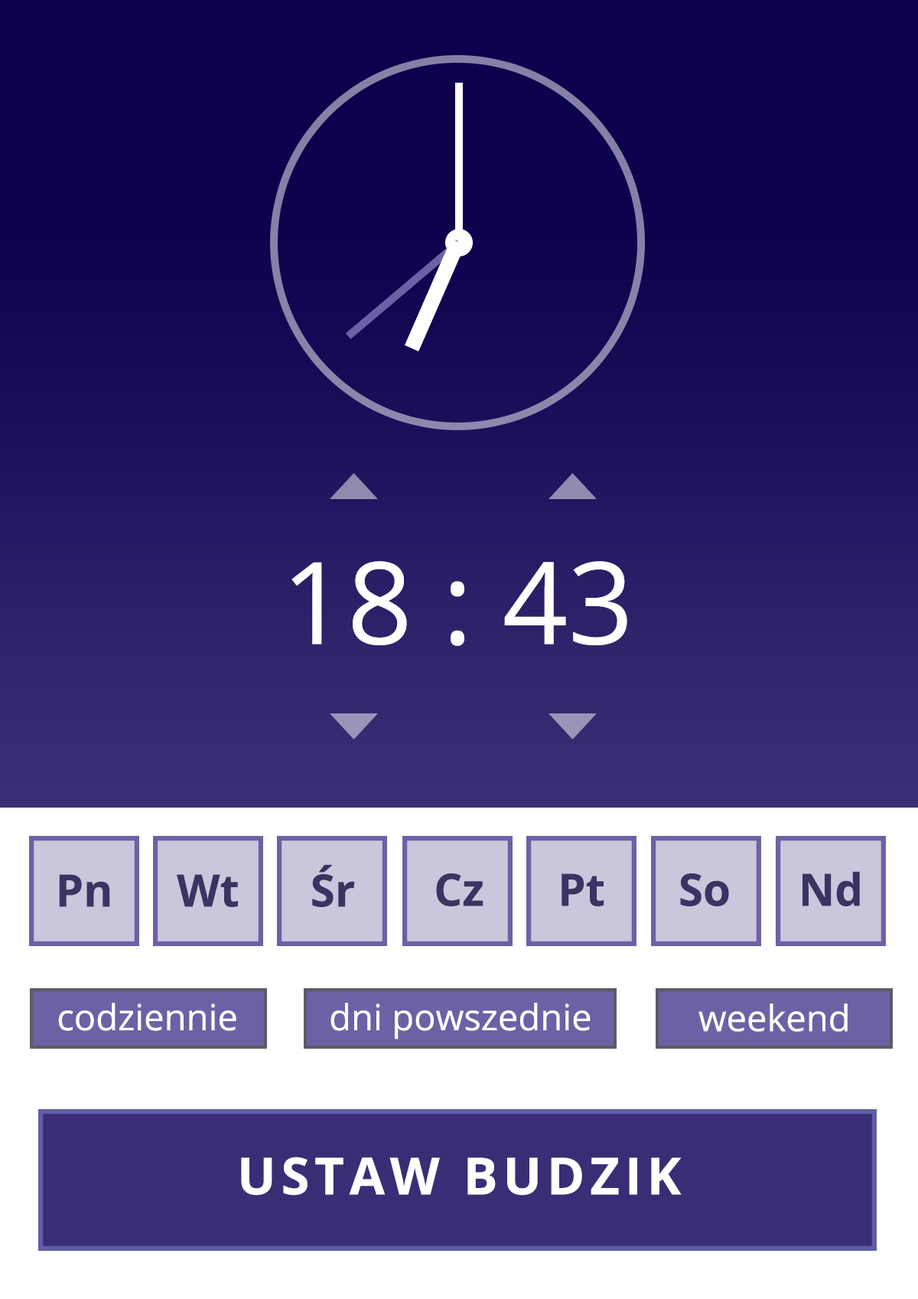
<style>
.page{position:relative;width:918px;height:1299px}
.page>*{position:absolute;margin:0}
.t1{font:114.1px "OpenSans";color:#ffffff;text-transform:uppercase}
.t2{font:44.6px "OpenSans-Bold";color:#3b3362}
.t3{font:36.1px "OpenSans";color:#ffffff}
.t4{font:51.2px "OpenSans-Bold";letter-spacing:0.1em;color:#ffffff;text-transform:uppercase}
</style>
<div class="page">
<p class="t1" style="left:292px;top:561px;width:335px;height:85px">18 : 43</p>
<p class="t2" style="left:312px;top:864px;width:43px;height:43px">Śr</p>
<p class="t2" style="left:59px;top:874px;width:51px;height:33px">Pn</p>
<p class="t2" style="left:177px;top:874px;width:61px;height:33px">Wt</p>
<p class="t2" style="left:436px;top:873px;width:48px;height:33px">Cz</p>
<p class="t2" style="left:562px;top:873px;width:43px;height:33px">Pt</p>
<p class="t2" style="left:680px;top:873px;width:49px;height:33px">So</p>
<p class="t2" style="left:803px;top:871px;width:57px;height:35px">Nd</p>
<p class="t3" style="left:58px;top:1002px;width:178px;height:29px">codziennie</p>
<p class="t3" style="left:331px;top:1002px;width:260px;height:37px">dni powszednie</p>
<p class="t3" style="left:699px;top:1003px;width:149px;height:29px">weekend</p>
<p class="t4" style="left:241px;top:1156px;width:441px;height:39px">Ustaw Budzik</p>
</div>
